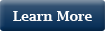
<style>
.page{position:relative;width:105px;height:31px}
.page>*{position:absolute;margin:0}
.t1{font:14px "LucidaBright-Demi";color:#ffffff}
</style>
<div class="page">
<p class="t1" style="left:13px;top:11px;width:79px;height:10px">Learn More</p>
</div>
